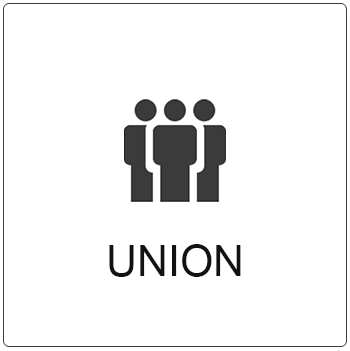
<style>
.page{position:relative;width:350px;height:351px;background:#ffffff}
.page>*{position:absolute;margin:0}
.t1{font:60px "Utsaah";color:#121212}
</style>
<div class="page">
<p class="t1" style="left:109px;top:244px;width:132px;height:33px">UNION</p>
</div>
